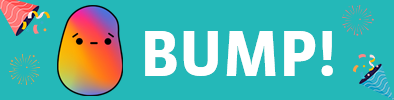
<style>
.page{position:relative;width:394px;height:100px;background:#24b8b8}
.page>*{position:absolute;margin:0}
.t1{font:60.4px "Sanuk-Bold";color:#ffffff}
</style>
<div class="page">
<p class="t1" style="left:145px;top:31px;width:188px;height:45px">BUMP!</p>
</div>
